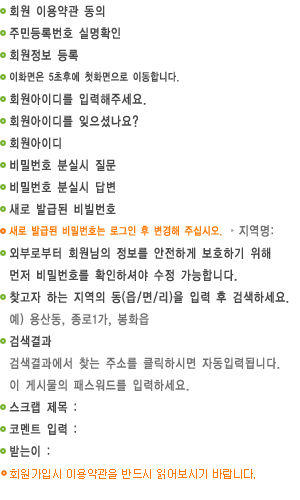
<style>
.page{position:relative;width:300px;height:500px;background:#ffffff}
.page>*{position:absolute;margin:0}
.t1{font:13px "YDIYGO130-KSCPC-EUC-H";color:#484848;font-weight:bold;scale:0.8 1}
.t2{font:11px "YDIYGO130-KSCPC-EUC-H";letter-spacing:-0.025em;color:#484848;font-weight:bold;scale:0.8 1}
.t3{font:11px "YDIYGO130-KSCPC-EUC-H";letter-spacing:-0.025em;color:#ff7800;font-weight:bold;scale:0.8 1}
.t4{font:13px "YDIYGO130-KSCPC-EUC-H";color:#737373;font-weight:bold;scale:0.8 1}
.t5{font:11px "Dotum";letter-spacing:-0.05em;color:#ff7800}
</style>
<div class="page">
<p class="t1" style="left:10px;top:5px;width:95px;height:13px">회원 이용약관 동의</p>
<p class="t1" style="left:9px;top:27px;width:111px;height:13px">주민등록번호 실명확인</p>
<p class="t1" style="left:10px;top:49px;width:68px;height:13px">회원정보 등록</p>
<p class="t2" style="left:10px;top:71px;width:169px;height:11px">이화면은 5초후에 첫화면으로 이동합니다.</p>
<p class="t1" style="left:10px;top:93px;width:136px;height:12px">회원아이디를 입력해주세요.</p>
<p class="t1" style="left:10px;top:115px;width:128px;height:13px">회원아이디를 잊으셨나요?</p>
<p class="t1" style="left:10px;top:137px;width:51px;height:12px">회원아이디</p>
<p class="t1" style="left:10px;top:159px;width:106px;height:12px">비밀번호 분실시 질문</p>
<p class="t1" style="left:10px;top:181px;width:105px;height:12px">비밀번호 분실시 답변</p>
<p class="t1" style="left:9px;top:203px;width:107px;height:12px">새로 발급된 비빌번호</p>
<p class="t3" style="left:9px;top:225px;width:213px;height:11px">새로 발급된 비밀번호는 로그인 후 변경해 주십시오.</p>
<p class="t4" style="left:239px;top:225px;width:34px;height:12px">지역명:</p>
<p class="t1" style="left:10px;top:247px;width:261px;height:13px">외부로부터 회원님의 정보를 안전하게 보호하기 위해</p>
<p class="t1" style="left:10px;top:269px;width:227px;height:13px">먼저 비밀번호를 확인하셔야 수정 가능합니다.</p>
<p class="t1" style="left:9px;top:291px;width:280px;height:13px">찾고자 하는 지역의 동(읍/면/리)을 입력 후 검색하세요.</p>
<p class="t4" style="left:10px;top:313px;width:139px;height:13px">예) 용산동, 종로1가, 봉화읍</p>
<p class="t1" style="left:10px;top:335px;width:42px;height:12px">검색결과</p>
<p class="t4" style="left:10px;top:357px;width:270px;height:13px">검색결과에서 찾는 주소를 클릭하시면 자동입력됩니다.</p>
<p class="t4" style="left:10px;top:379px;width:179px;height:12px">이 게시물의 패스워드를 입력하세요.</p>
<p class="t1" style="left:9px;top:401px;width:67px;height:12px">스크랩 제목 :</p>
<p class="t1" style="left:9px;top:423px;width:67px;height:12px">코멘트 입력 :</p>
<p class="t1" style="left:10px;top:445px;width:40px;height:12px">받는이 :</p>
<p class="t5" style="left:10px;top:469px;width:245px;height:10px">회원가입시 이용약관을 반드시 읽어보시기 바랍니다.</p>
</div>
